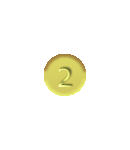
<style>
.page{position:relative;width:130px;height:150px;background:#ffffff}
.page>*{position:absolute;margin:0}
.t1{font:26px "Verdana"}
</style>
<div class="page">
<p class="t1" style="left:58px;top:68px;width:14px;height:19px">2</p>
</div>
